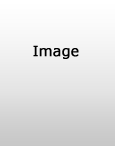
<style>
.page{position:relative;width:115px;height:146px}
.page>*{position:absolute;margin:0}
.t1{font:14px "Verdana";color:#000000;font-weight:bold}
</style>
<div class="page">
<p class="t1" style="left:33px;top:45px;width:46px;height:14px">Image</p>
</div>
